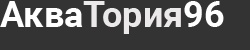
<style>
.page{position:relative;width:250px;height:50px;background:#333333}
.page>*{position:absolute;margin:0}
.t1{font:36px "Roboto-Bold";color:#ebe9e9}
.t2{font:36px "Roboto-Bold";color:#ffffff}
</style>
<div class="page">
<p class="t1" style="left:0px;top:1px;width:224px;height:33px"><span class="t2">Аква</span>Тория<span class="t2">96</span></p>
</div>
